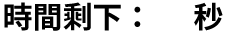
<style>
.page{position:relative;width:228px;height:35px;background:#ffffff}
.page>*{position:absolute;margin:0}
.t1{font:30px "NotoSansHant-Bold";color:#000000}
</style>
<div class="page">
<p class="t1" style="left:4px;top:2px;width:219px;height:29px">時間剩下：      秒</p>
</div>
